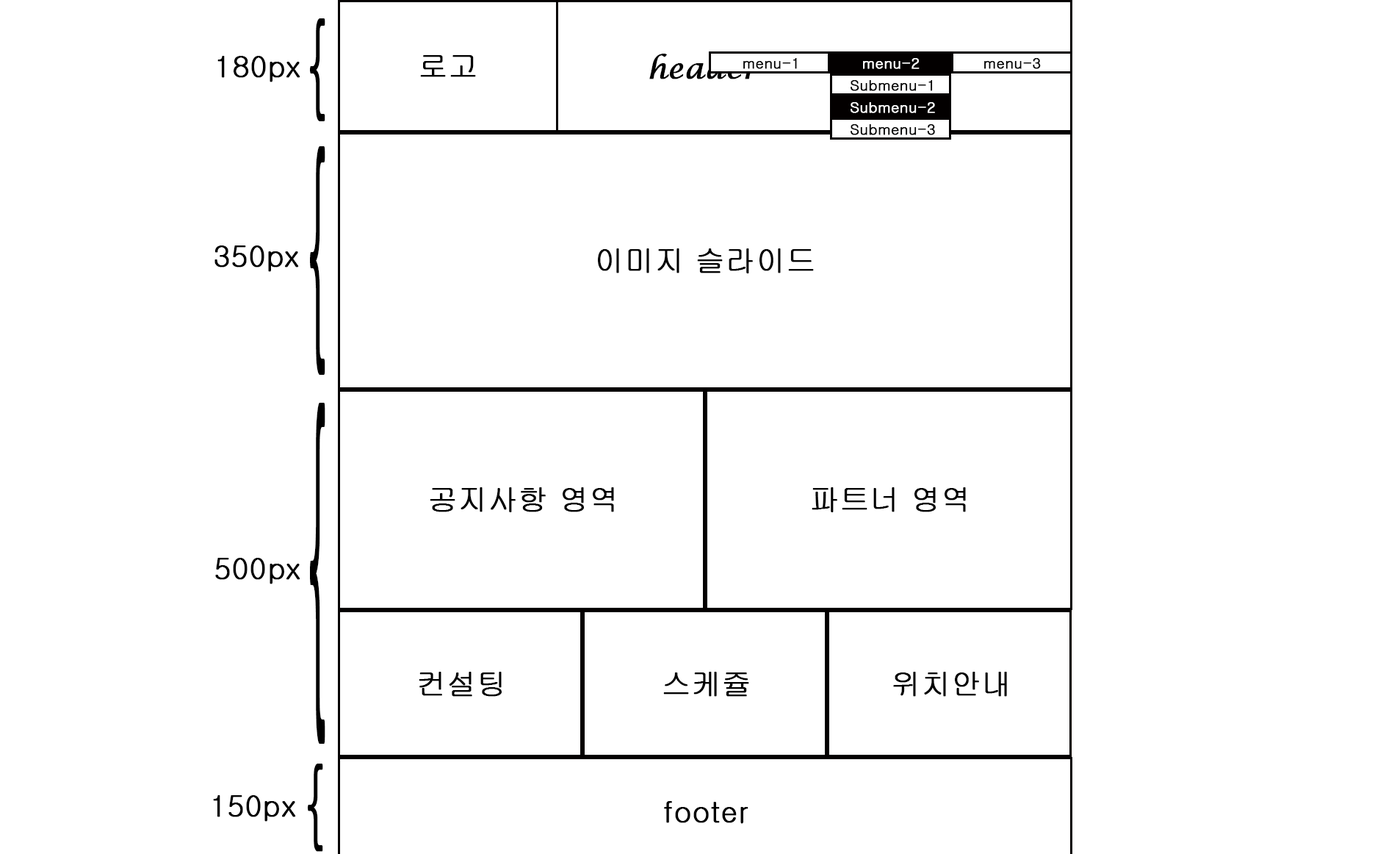
<style>
.page{position:relative;width:1397px;height:854px;background:#ffffff}
.page>*{position:absolute;margin:0}
.t1{font:109.8px "Gulim";color:#000000;font-weight:bold;scale:0.38 1}
.t2{font:29.4px "LucidaCalligraphy-Italic";color:#000000;font-weight:bold}
.t3{font:29.4px "Gulim";color:#000000;font-weight:bold}
.t4{font:14.7px "Gulim";color:#000000;font-weight:bold}
.t5{font:14.7px "Gulim";color:#ffffff;font-weight:bold}
.t6{font:244.4px "Gulim";color:#000000;font-weight:bold;scale:0.17 1}
.t7{font:364.5px "Gulim";color:#000000;font-weight:bold;scale:0.11 1}
.t8{font:93.6px "Gulim";color:#000000;font-weight:bold;scale:0.45 1}
</style>
<div class="page">
<p class="t1" style="left:310px;top:18px;width:15px;height:103px">{</p>
<p class="t2" style="left:649px;top:54px;width:112px;height:25px">header</p>
<p class="t3" style="left:217px;top:56px;width:83px;height:26px">180px</p>
<p class="t3" style="left:420px;top:55px;width:56px;height:22px">로고</p>
<p class="t4" style="left:743px;top:58px;width:54px;height:11px">menu-1</p>
<p class="t5" style="left:863px;top:58px;width:57px;height:11px">menu-2</p>
<p class="t4" style="left:984px;top:58px;width:57px;height:11px">menu-3</p>
<p class="t4" style="left:851px;top:80px;width:82px;height:11px">Submenu-1</p>
<p class="t5" style="left:851px;top:102px;width:84px;height:11px">Submenu-2</p>
<p class="t4" style="left:851px;top:124px;width:84px;height:11px">Submenu-3</p>
<p class="t6" style="left:310px;top:146px;width:15px;height:229px">{</p>
<p class="t3" style="left:214px;top:245px;width:85px;height:27px">350px</p>
<p class="t3" style="left:598px;top:248px;width:216px;height:25px">이미지 슬라이드</p>
<p class="t7" style="left:310px;top:403px;width:15px;height:340px">{</p>
<p class="t3" style="left:430px;top:487px;width:184px;height:25px">공지사항 영역</p>
<p class="t3" style="left:812px;top:487px;width:154px;height:25px">파트너 영역</p>
<p class="t3" style="left:215px;top:558px;width:85px;height:26px">500px</p>
<p class="t3" style="left:419px;top:671px;width:83px;height:25px">컨설팅</p>
<p class="t3" style="left:663px;top:671px;width:86px;height:25px">스케쥴</p>
<p class="t3" style="left:893px;top:671px;width:114px;height:25px">위치안내</p>
<p class="t8" style="left:308px;top:763px;width:15px;height:88px">{</p>
<p class="t3" style="left:213px;top:795px;width:83px;height:26px">150px</p>
<p class="t3" style="left:664px;top:801px;width:84px;height:22px">footer</p>
</div>
